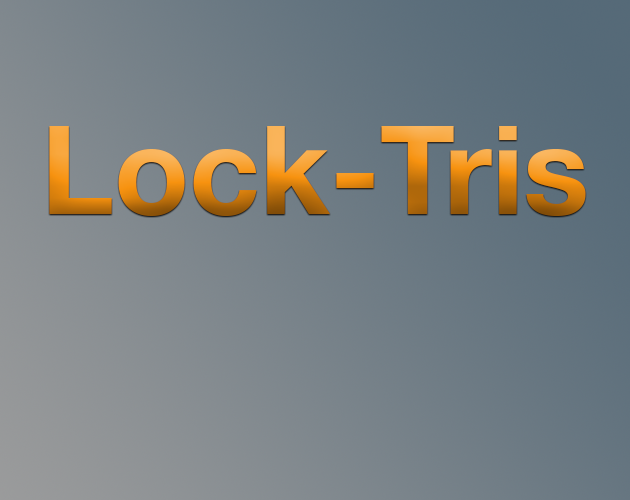
<style>
.page{position:relative;width:630px;height:500px}
.page>*{position:absolute;margin:0}
.t1{font:123px "HelveticaNeue-Bold"}
</style>
<div class="page">
<p class="t1" style="left:49px;top:126px;width:537px;height:90px">Lock-Tris</p>
</div>
